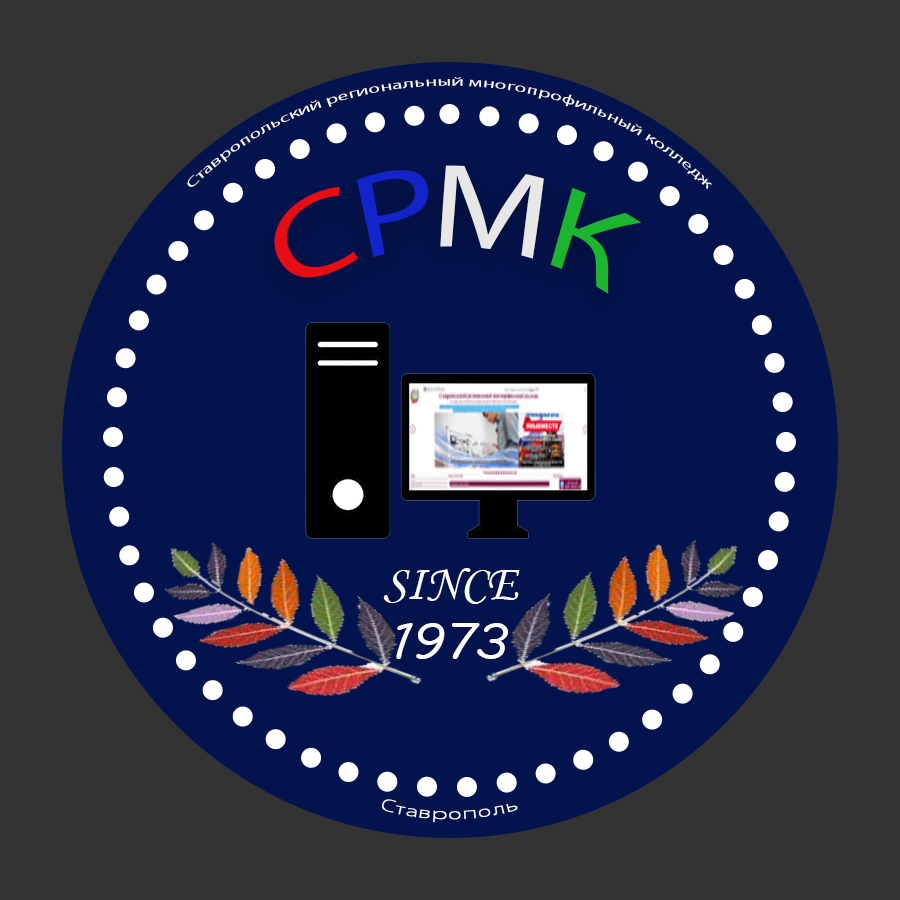
<style>
.page{position:relative;width:900px;height:900px;background:#333333}
.page>*{position:absolute;margin:0}
.t1{font:13.1px "MyriadPro-Regular";color:#ffffff}
.t2{font:117.9px "MyriadPro-Regular";color:#f00d0d;scale:0.86 1}
.t3{font:117.9px "MyriadPro-Regular";color:#1426d0;scale:0.86 1}
.t4{font:117.9px "MyriadPro-Regular";color:#f0f0f0;scale:0.86 1}
.t5{font:117.9px "MyriadPro-Regular";color:#1ebb2d;scale:0.86 1}
.t6{font:50px "MonotypeCorsiva";color:#ffffff}
.t7{font:50px "MVBoli";color:#ffffff}
.t8{font:17.4px "MyriadPro-Regular";color:#ffffff}
</style>
<div class="page">
<p class="t1" style="left:187px;top:77px;width:526px;height:113px;text-align:center">Ставропольский региональный многопрофильный колледж</p>
<p class="t2" style="left:274px;top:165px;width:368px;height:129px;opacity:0.94">С<span class="t3">Р</span><span class="t4">М</span><span class="t5">К</span></p>
<p class="t6" style="left:383px;top:568px;width:137px;height:91px;text-align:center">SINCE<br><span class="t7">1973</span></p>
<p class="t8" style="left:382px;top:799px;width:136px;height:24px">Ставрополь</p>
</div>
